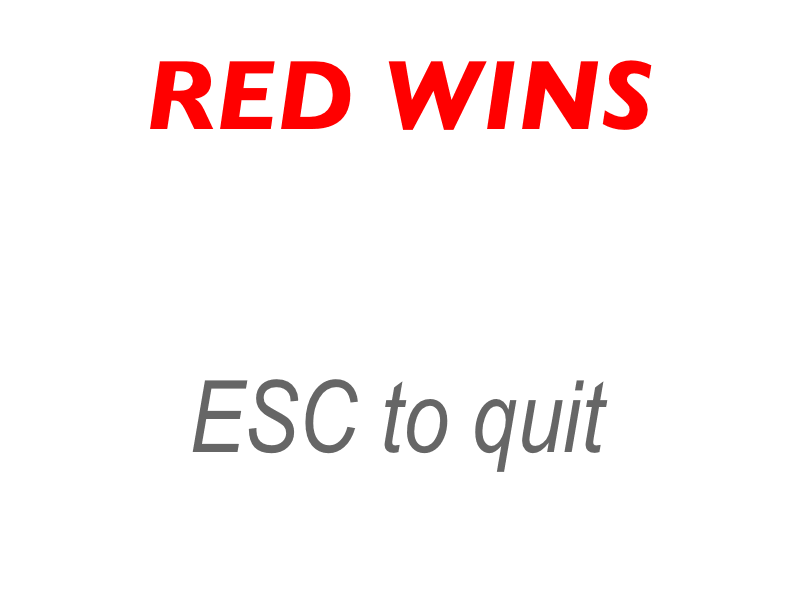
<style>
.page{position:relative;width:800px;height:600px;background:#ffffff}
.page>*{position:absolute;margin:0}
.t1{font:100px "GillSans-BoldItalic";color:#ff0000}
.t2{font:100px "ArialNarrow-Italic";color:#666666}
</style>
<div class="page">
<p class="t1" style="left:150px;top:60px;width:502px;height:70px">RED WINS</p>
<p class="t2" style="left:192px;top:379px;width:416px;height:93px">ESC to quit</p>
</div>
